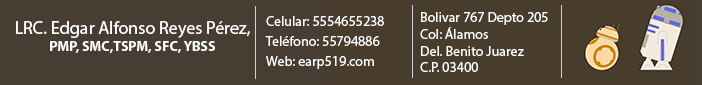
<style>
.page{position:relative;width:702px;height:85px;background:#473d32}
.page>*{position:absolute;margin:0}
.t1{font:14px "MyriadPro-Regular";color:#ffffff}
.t2{font:18px "MyriadPro-Regular";color:#ffffff}
.t3{font:14px "MyriadPro-Bold";color:#ffffff}
</style>
<div class="page">
<p class="t1" style="left:266px;top:16px;width:118px;height:10px">Celular: 5554655238</p>
<p class="t1" style="left:420px;top:12px;width:128px;height:60px">Bolivar 767 Depto 205<br>Col: Álamos<br>Del. Benito Juarez<br>C.P. 03400</p>
<p class="t2" style="left:16px;top:21px;width:234px;height:32px;text-align:center">LRC. Edgar Alfonso Reyes Pérez, <span class="t3">PMP, SMC,TSPM, SFC, YBSS</span></p>
<p class="t1" style="left:265px;top:36px;width:115px;height:10px">Teléfono: 55794886</p>
<p class="t1" style="left:266px;top:56px;width:108px;height:13px">Web: earp519.com</p>
</div>
